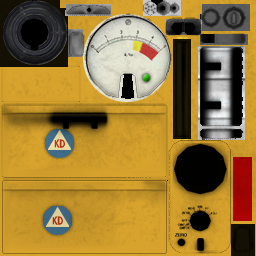
<style>
.page{position:relative;width:256px;height:256px}
.page>*{position:absolute;margin:0}
.t1{font:8.4px "CenturyGothic-Bold";color:#b13619}
.t2{font:8.4px "CenturyGothic-Bold";color:#a73318}
</style>
<div class="page">
<p class="t1" style="left:54px;top:139px;width:11px;height:9px">KD</p>
<p class="t2" style="left:52px;top:216px;width:11px;height:9px">KD</p>
</div>
